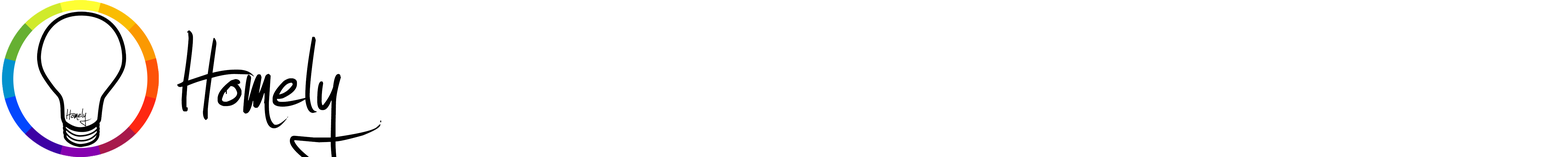
<style>
.page{position:relative;width:1568px;height:157px;background:#ffffff}
.page>*{position:absolute;margin:0}
.t1{font:27.7px "JellykaEstryasHandwriting";color:#000000}
</style>
<div class="page">
<p class="t1" style="left:66px;top:108px;width:25px;height:18px;rotate:-5deg">Homely</p>
</div>
